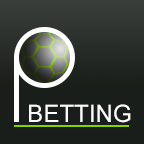
<style>
.page{position:relative;width:144px;height:144px;background:#1a1e1a}
.page>*{position:absolute;margin:0}
.t1{font:24px "ArialMT";color:#ffffff}
</style>
<div class="page">
<p class="t1" style="left:29px;top:104px;width:102px;height:19px">BETTING</p>
</div>
